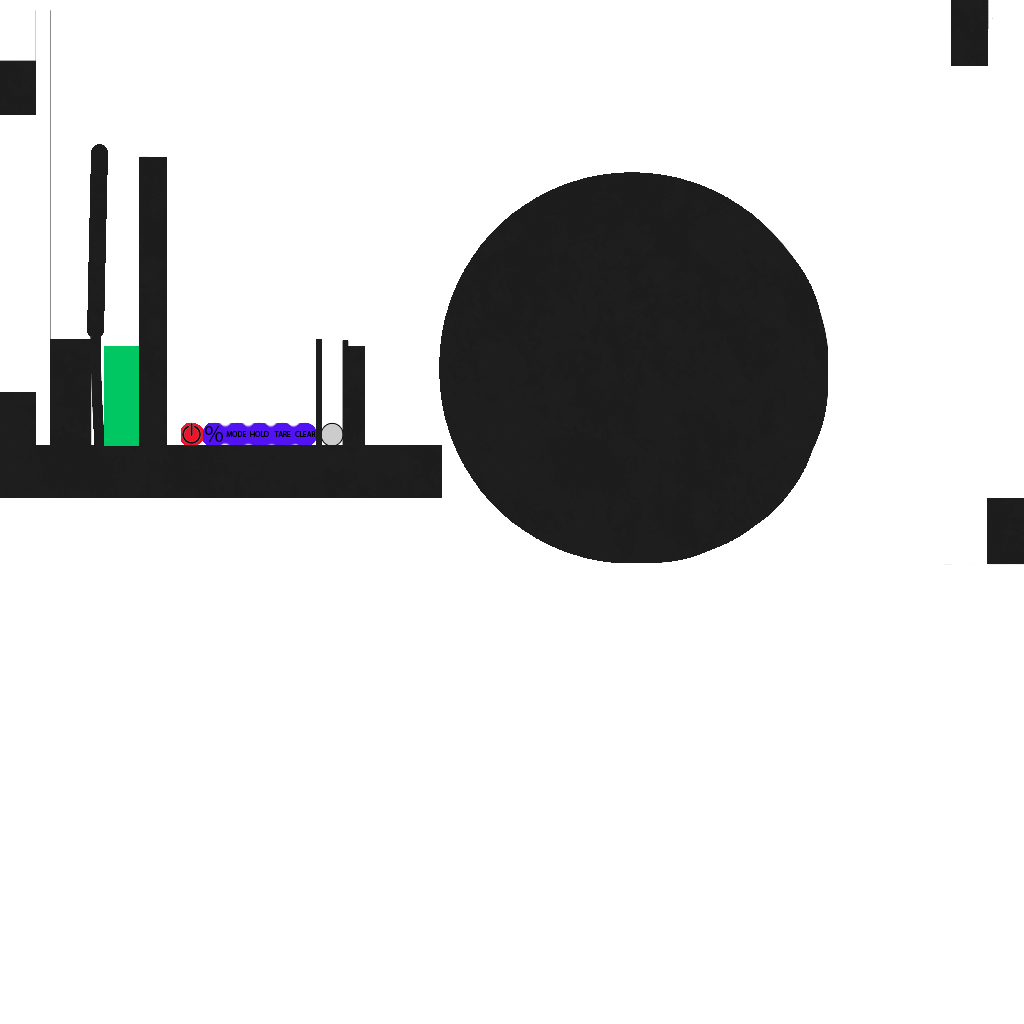
<style>
.page{position:relative;width:1024px;height:1024px;background:#ffffff}
.page>*{position:absolute;margin:0}
.t1{font:24.7px "MyriadPro-Regular";color:#000000}
.t2{font:7.9px "MyriadPro-Regular";color:#000000}
</style>
<div class="page">
<p class="t1" style="left:205px;top:426px;width:18px;height:16px">%</p>
<p class="t2" style="left:226px;top:431px;width:20px;height:7px">MODE</p>
<p class="t2" style="left:250px;top:431px;width:19px;height:6px">HOLD</p>
<p class="t2" style="left:274px;top:431px;width:17px;height:6px">TARE</p>
<p class="t2" style="left:295px;top:431px;width:21px;height:6px">CLEAR</p>
</div>
